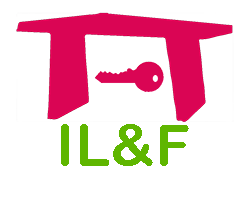
<style>
.page{position:relative;width:250px;height:208px;background:#ffffff}
.page>*{position:absolute;margin:0}
.t1{font:58.3px "ArialRoundedMTBold";letter-spacing:0.005em;color:#5fb600}
</style>
<div class="page">
<p class="t1" style="left:61px;top:124px;width:128px;height:42px">IL&amp;F</p>
</div>
